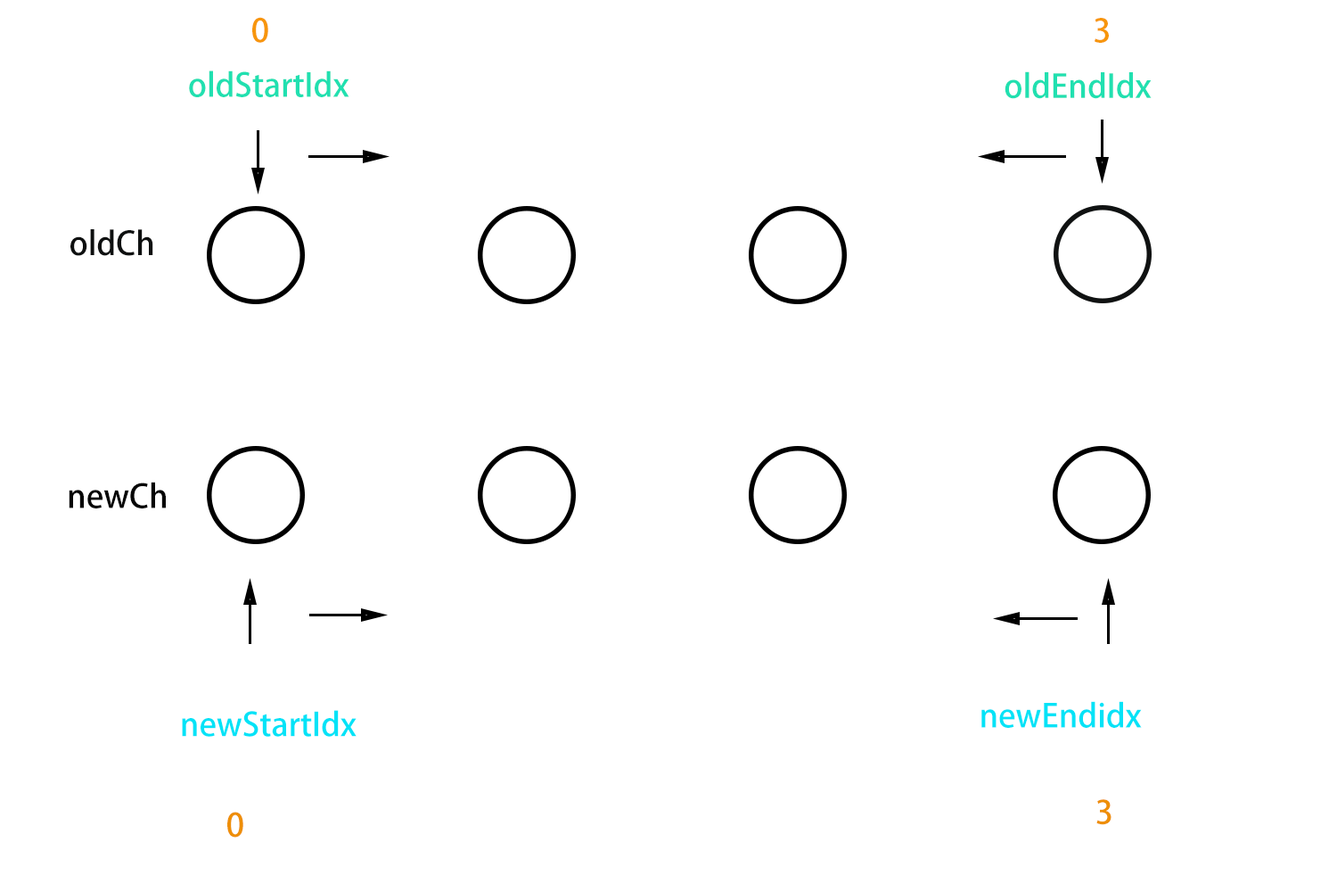
<style>
.page{position:relative;width:1337px;height:892px;background:#ffffff}
.page>*{position:absolute;margin:0}
.t1{font:32.1px "AdobeHeitiStd-Regular";color:#f7960c}
.t2{font:32.1px "AdobeHeitiStd-Regular";color:#21e0b0}
.t3{font:21.4px "AdobeHeitiStd-Regular";color:#ffffff}
.t4{font:32.1px "AdobeHeitiStd-Regular";color:#0e1010}
.t5{font:32.1px "AdobeHeitiStd-Regular";color:#050505}
.t6{font:32.1px "AdobeHeitiStd-Regular";color:#02e3f7}
.t7{font:32.1px "AdobeHeitiStd-Regular";color:#ee8f07}
</style>
<div class="page">
<p class="t1" style="left:252px;top:17px;width:16px;height:26px">0</p>
<p class="t1" style="left:1095px;top:18px;width:14px;height:25px">3</p>
<p class="t2" style="left:179px;top:70px;width:171px;height:27px"><span class="t3">s</span>oldStartIdx</p>
<p class="t2" style="left:1005px;top:71px;width:147px;height:28px">oldEndIdx</p>
<p class="t4" style="left:70px;top:229px;width:83px;height:27px">oldCh</p>
<p class="t5" style="left:69px;top:481px;width:97px;height:27px">newCh</p>
<p class="t6" style="left:982px;top:701px;width:160px;height:27px">newEndidx</p>
<p class="t6" style="left:182px;top:710px;width:175px;height:26px">newStartIdx</p>
<p class="t7" style="left:1097px;top:799px;width:15px;height:26px">3</p>
<p class="t7" style="left:227px;top:811px;width:16px;height:26px">0</p>
</div>
